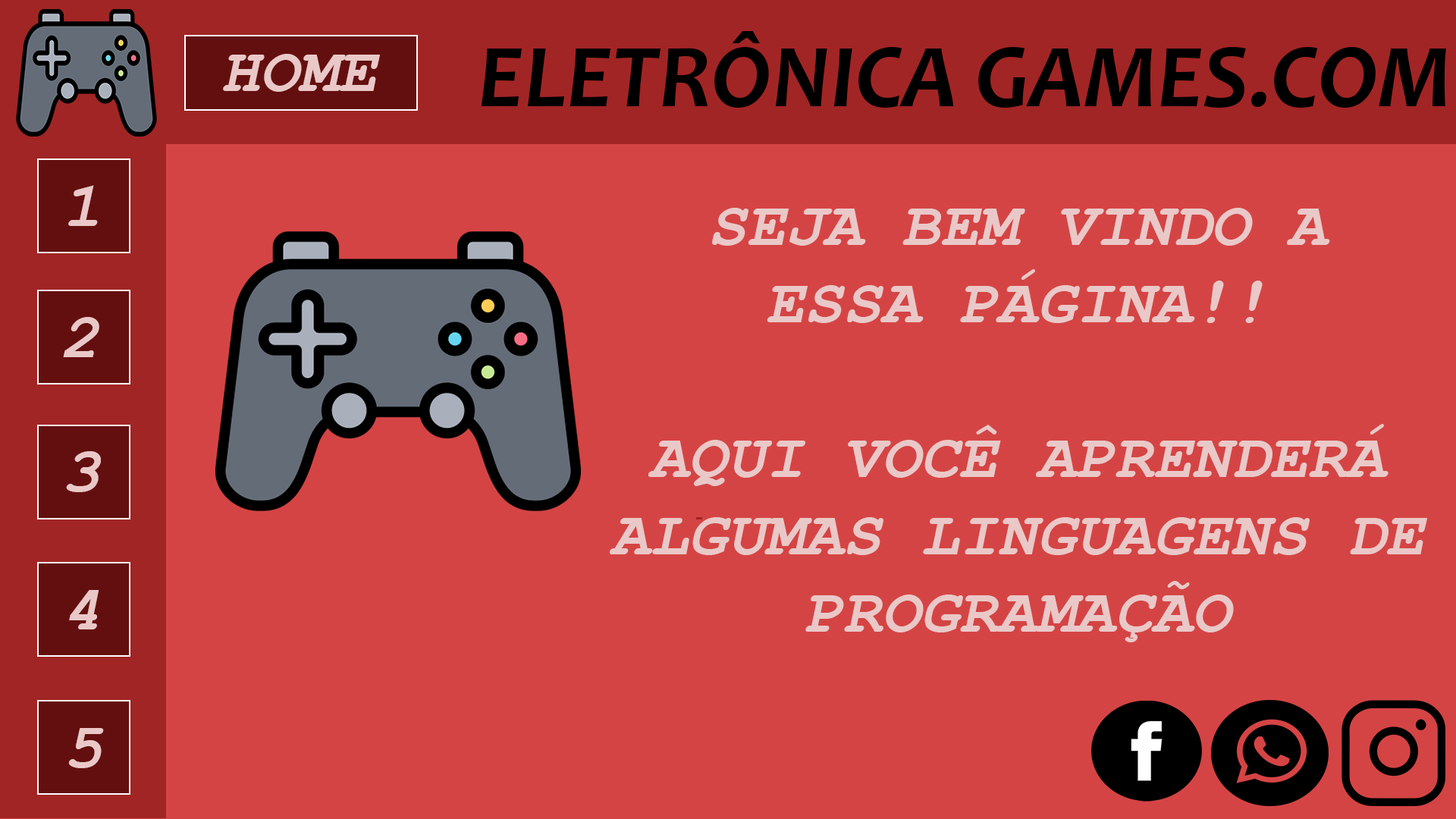
<style>
.page{position:relative;width:1456px;height:819px;background:#d54444}
.page>*{position:absolute;margin:0}
.t1{font:91px "Candara-BoldItalic";color:#000000}
.t2{font:64.5px "CourierNewPS-BoldItalicMT";color:#eac8c8}
</style>
<div class="page">
<p class="t1" style="left:481px;top:31px;width:965px;height:77px">ELETRÔNICA GAMES.COM</p>
<p class="t2" style="left:223px;top:54px;width:157px;height:38px">HOME</p>
<p class="t2" style="left:68px;top:185px;width:30px;height:41px">1</p>
<p class="t2" style="left:610px;top:208px;width:817px;height:434px;text-align:center">SEJA BEM VINDO A<br>ESSA PÁGINA!!<br><br>AQUI VOCÊ APRENDERÁ<br>ALGUMAS LINGUAGENS DE<br>PROGRAMAÇÃO</p>
<p class="t2" style="left:63px;top:317px;width:36px;height:40px">2</p>
<p class="t2" style="left:66px;top:451px;width:35px;height:41px">3</p>
<p class="t2" style="left:69px;top:590px;width:30px;height:39px">4</p>
<p class="t2" style="left:68px;top:728px;width:36px;height:40px">5</p>
</div>
